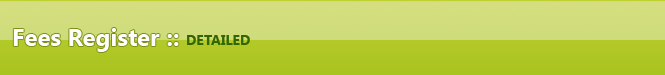
<style>
.page{position:relative;width:665px;height:75px}
.page>*{position:absolute;margin:0}
.t1{font:24px "SegoeUI-Bold";color:#fefefe}
.t2{font:14px "SegoeUI-Bold";color:#336600}
</style>
<div class="page">
<p class="t1" style="left:13px;top:28px;width:166px;height:24px">Fees Register ::</p>
<p class="t2" style="left:187px;top:35px;width:63px;height:10px">DETAILED</p>
</div>
